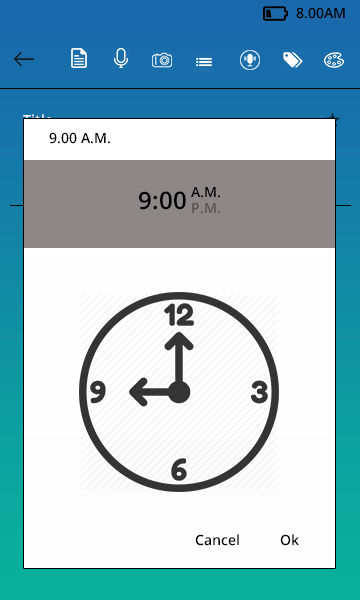
<style>
.page{position:relative;width:360px;height:600px}
.page>*{position:absolute;margin:0}
.t1{font:14px "OpenSans-Semibold";color:#000000}
.t2{font:24px "OpenSans-Semibold";color:#000000}
.t3{font:14px "OpenSans-Semibold";color:#585454}
</style>
<div class="page">
<p class="t1" style="left:296px;top:7px;width:49px;height:12px">8.00AM</p>
<p class="t1" style="left:49px;top:132px;width:61px;height:12px">9.00 A.M.</p>
<p class="t2" style="left:139px;top:191px;width:47px;height:19px">9:00</p>
<p class="t1" style="left:191px;top:187px;width:29px;height:11px">A.M.</p>
<p class="t3" style="left:192px;top:203px;width:28px;height:11px">P.M.</p>
<p class="t1" style="left:195px;top:534px;width:44px;height:12px">Cancel</p>
<p class="t1" style="left:280px;top:534px;width:19px;height:12px">Ok</p>
</div>
